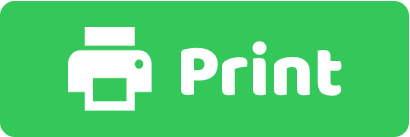
<style>
.page{position:relative;width:410px;height:137px;background:#34c759}
.page>*{position:absolute;margin:0}
.t1{font:75px "Baloo-Regular";color:#ffffff}
</style>
<div class="page">
<p class="t1" style="left:180px;top:41px;width:162px;height:55px">Print</p>
</div>
